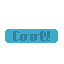
<style>
.page{position:relative;width:64px;height:64px;background:#ffffff}
.page>*{position:absolute;margin:0}
.t1{font:14px "Superscript";color:#3281a2}
</style>
<div class="page">
<p class="t1" style="left:13px;top:31px;width:37px;height:10px">Cool!</p>
</div>
